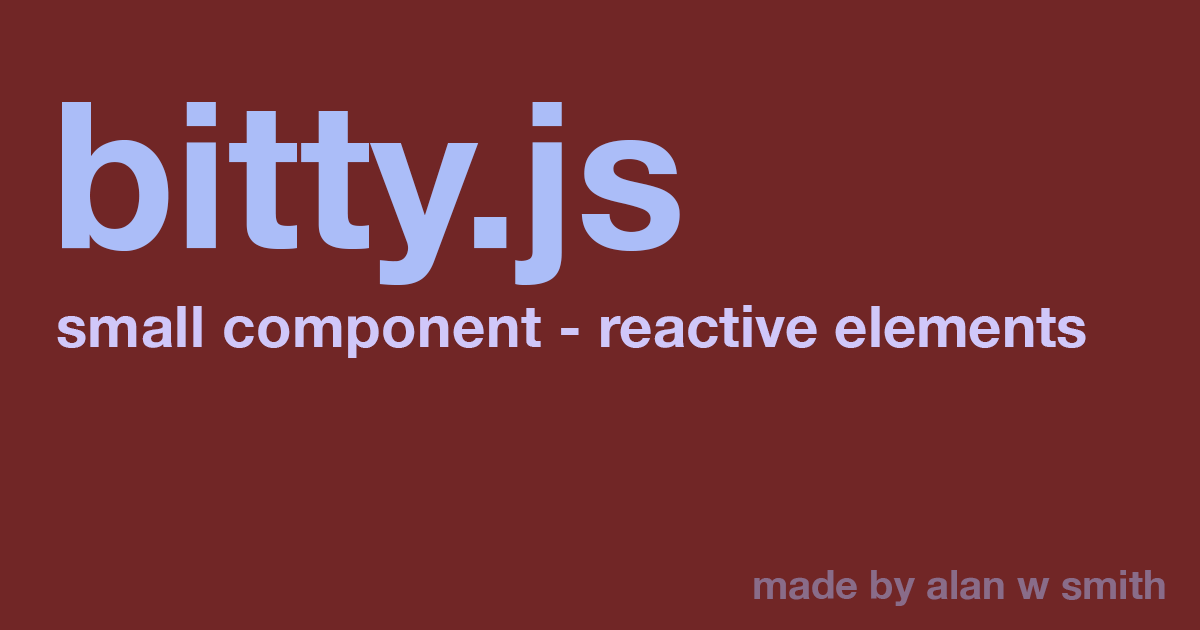
<style>
.page{position:relative;width:1200px;height:630px;background:#712626}
.page>*{position:absolute;margin:0}
.t1{font:204px "HelveticaNeue-Bold";color:#abbdf8}
.t2{font:58px "HelveticaNeue-Bold";color:#d0c7f9}
.t3{font:58px "HelveticaNeue-Bold";letter-spacing:0.01em;color:#d0c7f9}
.t4{font:40px "HelveticaNeue-Bold";color:#896c89}
</style>
<div class="page">
<p class="t1" style="left:62px;top:102px;width:618px;height:183px">bitty.js</p>
<p class="t2" style="left:57px;top:305px;width:1029px;height:53px"><span class="t3">small component</span> - reactive elements</p>
<p class="t4" style="left:754px;top:570px;width:411px;height:36px">made by alan w smith</p>
</div>
